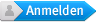
<style>
.page{position:relative;width:96px;height:22px}
.page>*{position:absolute;margin:0}
.t1{font:14px "MetaPlusMedium-Roman";letter-spacing:-0.025em;color:#ffffff}
</style>
<div class="page">
<p class="t1" style="left:26px;top:4px;width:57px;height:12px">Anmelden</p>
</div>
